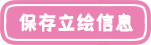
<style>
.page{position:relative;width:151px;height:45px;background:#eb81b2}
.page>*{position:absolute;margin:0}
.t1{font:12px "shetumodengxiaofangti";color:#ffffff;font-weight:bold;scale:0.94 1}
</style>
<div class="page">
<p class="t1" style="left:19px;top:13px;width:114px;height:19px">保存立绘信息</p>
</div>
